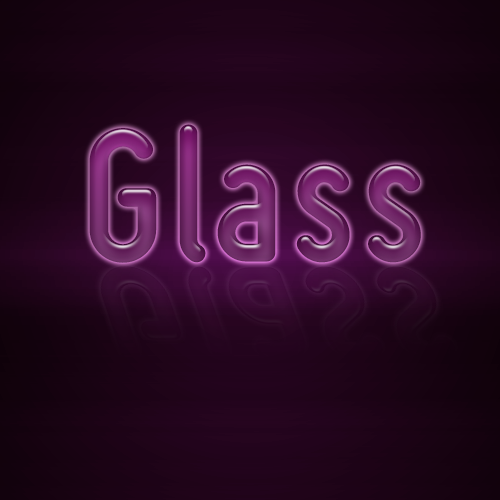
<style>
.page{position:relative;width:500px;height:500px}
.page>*{position:absolute;margin:0}
.t1{font:200px "Miso";color:#722969;font-weight:bold}
</style>
<div class="page">
<p class="t1" style="left:89px;top:124px;width:332px;height:139px">Glass</p>
</div>
